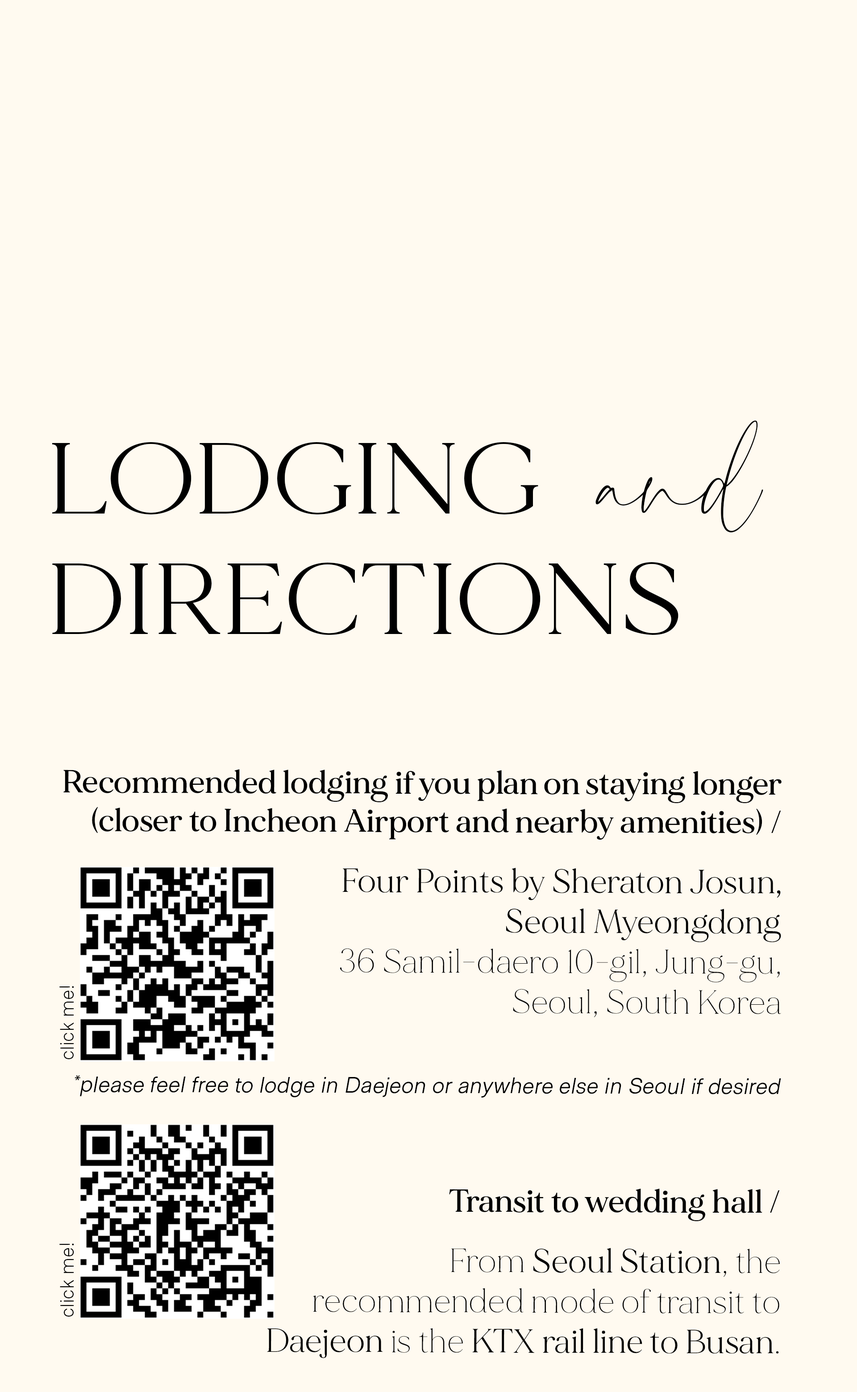
<style>
.page{position:relative;width:857px;height:1392px;background:#fffaf0}
.page>*{position:absolute;margin:0}
.t1{font:100.5px "MADEMirage";color:#000000;scale:1.09 1}
.t2{font:125.6px "Charlotte";color:#000000;scale:1.09 1}
.t3{font:32px "MADEMirage-Medium";color:#000000}
.t4{font:33.5px "MADEMirage";color:#000000}
.t5{font:33.5px "MADEMirage-Thin";color:#000000}
.t6{font:22.3px "MetroSans-BookItalic";color:#000000}
.t7{font:19px "MetroSans-Light";color:#000000}
</style>
<div class="page">
<p class="t1" style="left:52px;top:420px;width:711px;height:215px">LODGING  <span class="t2">and<br></span>DIRECTIONS</p>
<p class="t3" style="left:63px;top:769px;width:718px;height:589px;text-align:right">Recommended lodging if you plan on staying longer <br>(closer to Incheon Airport and nearby amenities) /<br>  <br><span class="t4">Four Points by Sheraton Josun,<br> Seoul Myeongdong<br></span><span class="t5">36 Samil-daero 10-gil, Jung-gu,  <br>Seoul, South Korea<br></span><span class="t6"><br><br>*please feel free to lodge in Daejeon or anywhere else in Seoul if desired<br><br><br></span>Transit to wedding hall /<br>   <br><span class="t5">From </span><span class="t4">Seoul Station</span><span class="t5">, the <br>recommended mode of transit to <br></span><span class="t4">Daejeon </span><span class="t5">is the </span><span class="t4">KTX rail line to Busan</span><span class="t5">.</span></p>
<p class="t7" style="left:59px;top:986px;width:15px;height:73px;rotate:-90deg">click me!</p>
<p class="t7" style="left:59px;top:1243px;width:15px;height:74px;rotate:-90deg">click me!</p>
</div>
